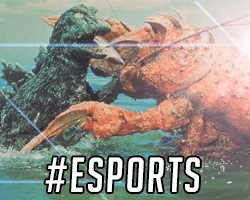
<style>
.page{position:relative;width:250px;height:200px}
.page>*{position:absolute;margin:0}
.t1{font:48px "BigNoodleTitling-Oblique";letter-spacing:0.05em;color:#ffffff}
</style>
<div class="page">
<p class="t1" style="left:45px;top:157px;width:155px;height:35px">#ESPORTS</p>
</div>
